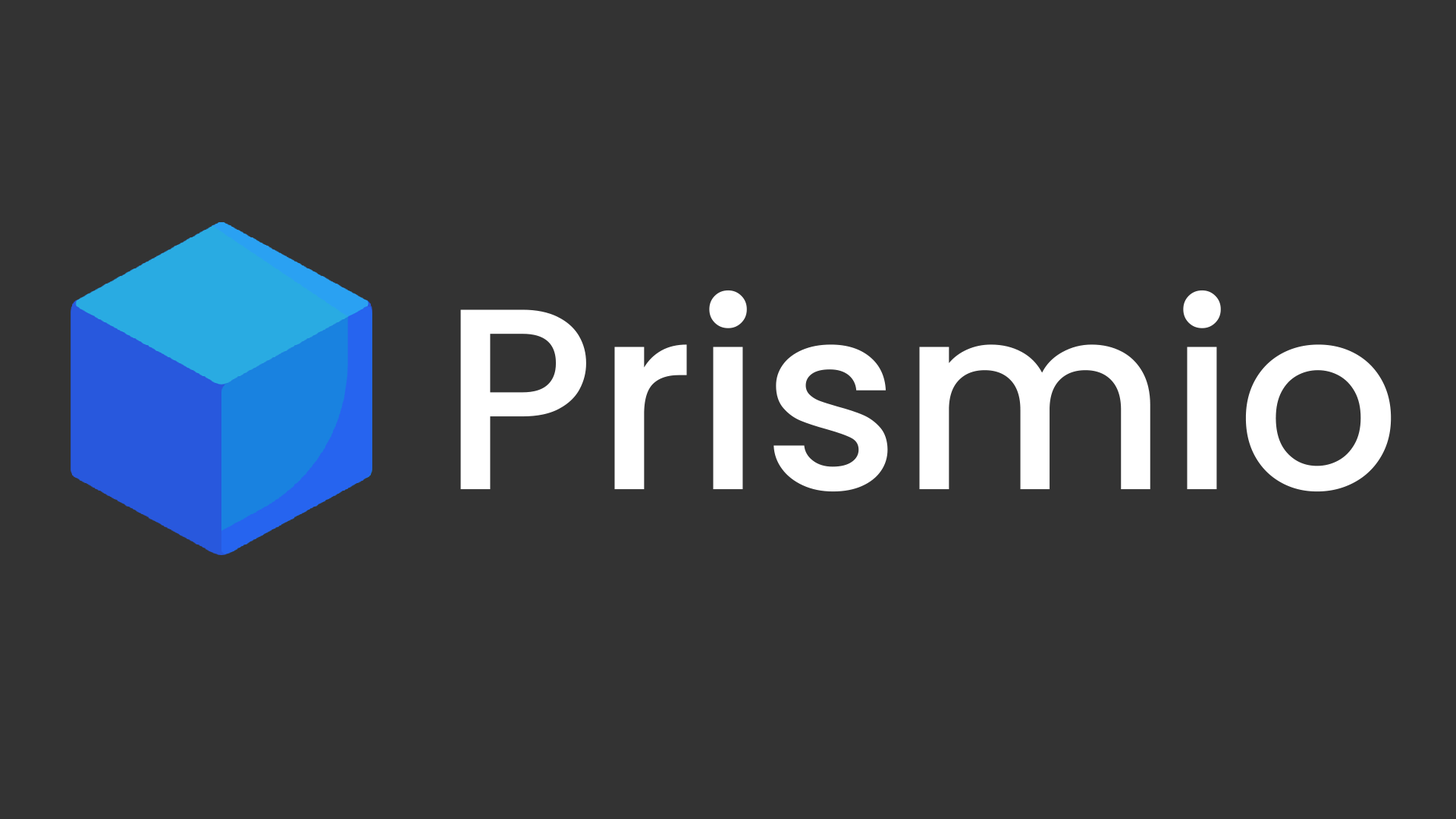
<style>
.page{position:relative;width:1456px;height:819px;background:#333333}
.page>*{position:absolute;margin:0}
.t1{font:258px "Poppins-Medium";color:#ffffff}
</style>
<div class="page">
<p class="t1" style="left:460px;top:290px;width:932px;height:202px">Prismio</p>
</div>
